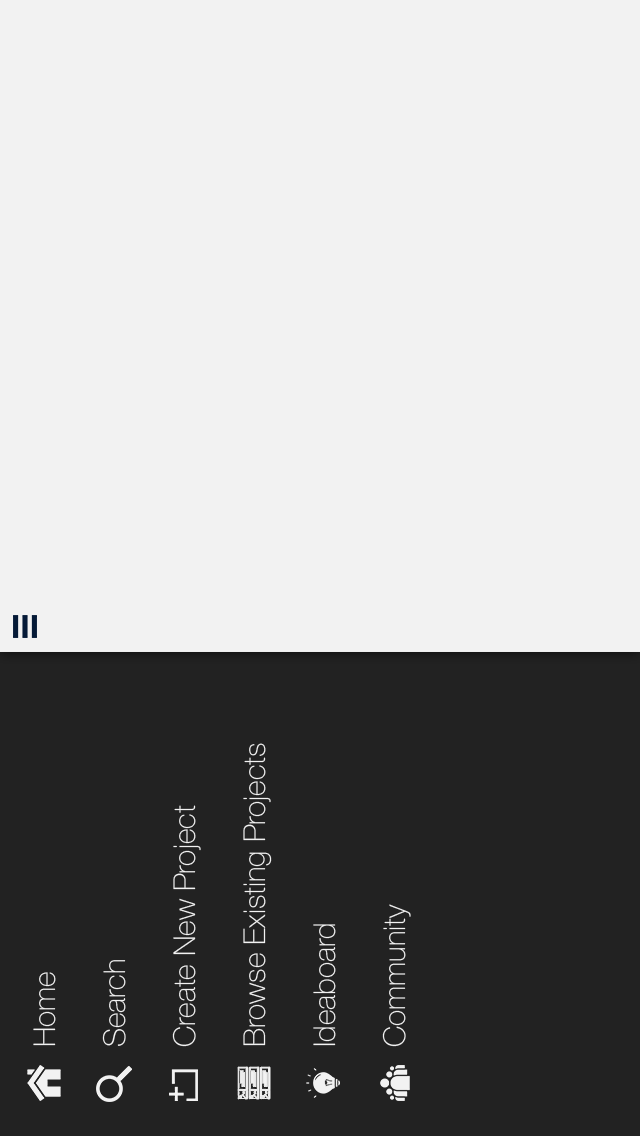
<style>
.page{position:relative;width:640px;height:1136px;background:#f2f2f2}
.page>*{position:absolute;margin:0}
.t1{font:30px "HelveticaNeue-Thin";color:#f2f2f2}
</style>
<div class="page">
<p class="t1" style="left:243px;top:743px;width:29px;height:303px;rotate:-90deg">Browse Existing Projects</p>
<p class="t1" style="left:172px;top:805px;width:29px;height:242px;rotate:-90deg">Create New Project</p>
<p class="t1" style="left:382px;top:904px;width:29px;height:143px;rotate:-90deg">Community</p>
<p class="t1" style="left:313px;top:924px;width:23px;height:122px;rotate:-90deg">Ideaboard</p>
<p class="t1" style="left:102px;top:960px;width:24px;height:86px;rotate:-90deg">Search</p>
<p class="t1" style="left:33px;top:972px;width:23px;height:74px;rotate:-90deg">Home</p>
</div>
